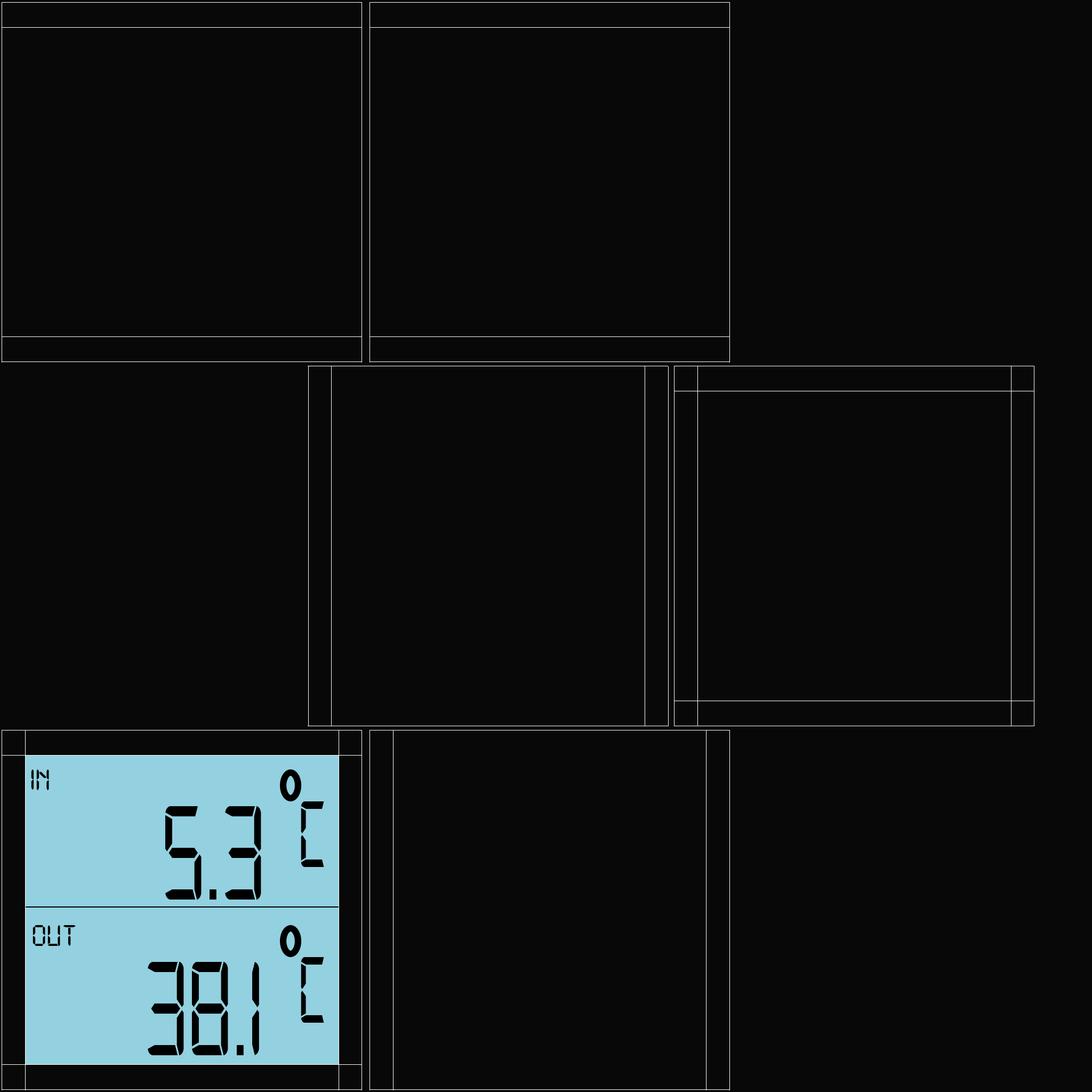
<style>
.page{position:relative;width:1092px;height:1092px;background:#080808}
.page>*{position:absolute;margin:0}
.t1{font:32px "Digital-7";color:#000000}
.t2{font:142.7px "Digital-7";color:#000000;scale:0.66 1}
.t3{font:100.1px "Digital-7";color:#000000;scale:0.66 1}
</style>
<div class="page">
<p class="t1" style="left:31px;top:769px;width:18px;height:21px">in</p>
<p class="t2" style="left:165px;top:806px;width:96px;height:94px">5.3</p>
<p class="t3" style="left:301px;top:801px;width:23px;height:66px">c</p>
<p class="t1" style="left:33px;top:925px;width:43px;height:21px">out</p>
<p class="t2" style="left:148px;top:961px;width:111px;height:95px">38.1</p>
<p class="t3" style="left:301px;top:957px;width:23px;height:66px">c</p>
</div>
